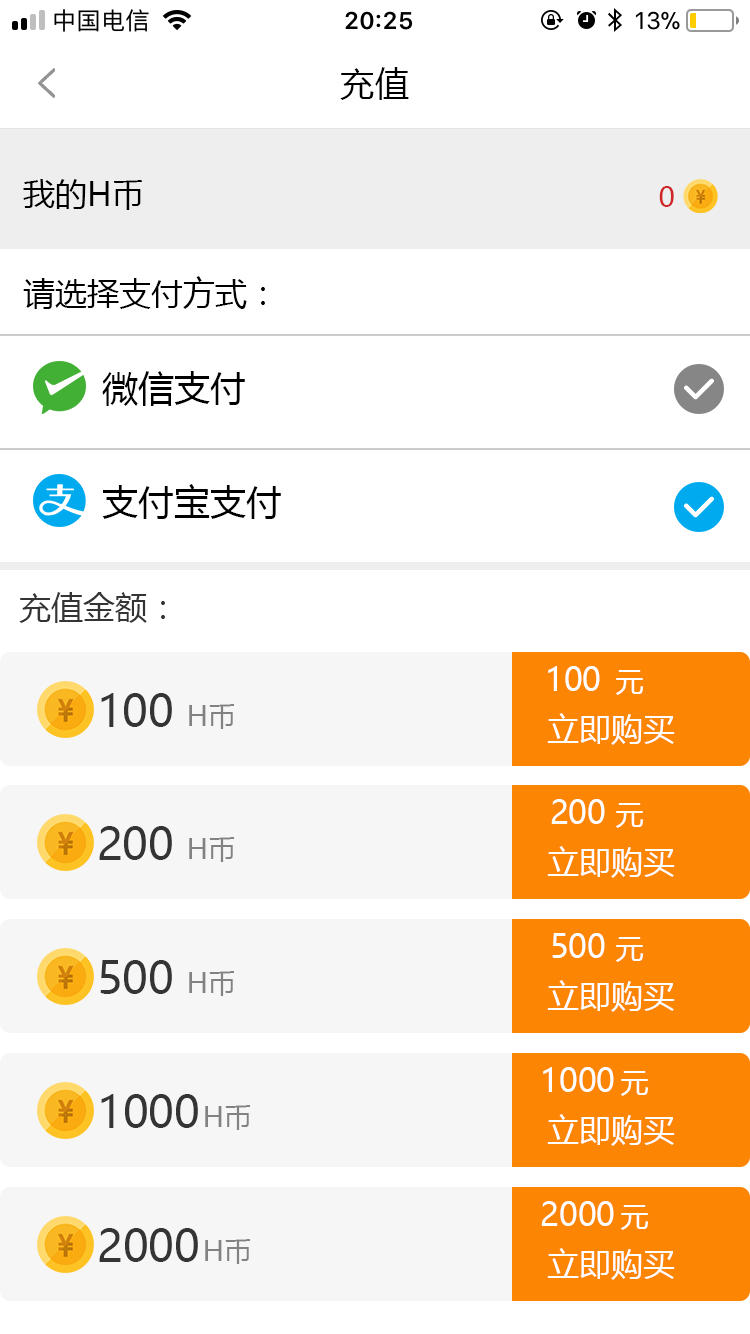
<style>
.page{position:relative;width:750px;height:1334px;background:#ffffff}
.page>*{position:absolute;margin:0}
.t1{font:34px "MicrosoftYaHei";letter-spacing:0.01em;color:#000000}
.t2{font:32px "MicrosoftYaHei";letter-spacing:0.01em;color:#000000}
.t3{font:28px "MicrosoftYaHei";letter-spacing:0.01em;color:#cf2727}
.t4{font:32px "MicrosoftYaHei";color:#000000}
.t5{font:36px "MicrosoftYaHei";color:#000000}
.t6{font:32px "MicrosoftYaHei";color:#343434}
.t7{font:32px "MicrosoftYaHei";color:#ffffff}
.t8{font:28px "MicrosoftYaHei";color:#ffffff}
.t9{font:44px "MicrosoftYaHei";color:#343434}
.t10{font:28px "MicrosoftYaHei";color:#828282}
</style>
<div class="page">
<p class="t1" style="left:340px;top:67px;width:69px;height:33px">充值</p>
<p class="t2" style="left:23px;top:179px;width:119px;height:31px">我的H币</p>
<p class="t3" style="left:659px;top:186px;width:15px;height:21px">0</p>
<p class="t4" style="left:23px;top:276px;width:242px;height:33px">请选择支付方式：</p>
<p class="t5" style="left:102px;top:371px;width:143px;height:35px">微信支付</p>
<p class="t5" style="left:102px;top:484px;width:179px;height:35px">支付宝支付</p>
<p class="t6" style="left:19px;top:592px;width:146px;height:31px">充值金额：</p>
<p class="t7" style="left:548px;top:666px;width:52px;height:25px">100</p>
<p class="t8" style="left:615px;top:670px;width:29px;height:25px">元</p>
<p class="t9" style="left:101px;top:693px;width:71px;height:34px">100</p>
<p class="t10" style="left:189px;top:704px;width:46px;height:25px">H币</p>
<p class="t7" style="left:547px;top:713px;width:128px;height:32px">立即购买</p>
<p class="t7" style="left:551px;top:799px;width:54px;height:25px">200</p>
<p class="t8" style="left:615px;top:803px;width:29px;height:25px">元</p>
<p class="t9" style="left:99px;top:826px;width:73px;height:34px">200</p>
<p class="t10" style="left:189px;top:837px;width:46px;height:25px">H币</p>
<p class="t7" style="left:547px;top:846px;width:128px;height:32px">立即购买</p>
<p class="t7" style="left:552px;top:933px;width:53px;height:25px">500</p>
<p class="t8" style="left:615px;top:937px;width:29px;height:25px">元</p>
<p class="t9" style="left:100px;top:960px;width:72px;height:34px">500</p>
<p class="t10" style="left:189px;top:971px;width:46px;height:25px">H币</p>
<p class="t7" style="left:547px;top:980px;width:128px;height:32px">立即购买</p>
<p class="t7" style="left:543px;top:1067px;width:71px;height:25px">1000</p>
<p class="t8" style="left:620px;top:1071px;width:29px;height:25px">元</p>
<p class="t9" style="left:101px;top:1094px;width:97px;height:34px">1000</p>
<p class="t10" style="left:205px;top:1105px;width:46px;height:25px">H币</p>
<p class="t7" style="left:547px;top:1114px;width:128px;height:32px">立即购买</p>
<p class="t7" style="left:541px;top:1201px;width:73px;height:25px">2000</p>
<p class="t8" style="left:620px;top:1205px;width:29px;height:25px">元</p>
<p class="t9" style="left:99px;top:1228px;width:99px;height:34px">2000</p>
<p class="t10" style="left:205px;top:1239px;width:46px;height:25px">H币</p>
<p class="t7" style="left:547px;top:1248px;width:128px;height:32px">立即购买</p>
</div>
